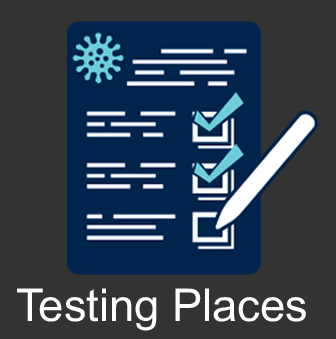
<style>
.page{position:relative;width:336px;height:339px;background:#333333}
.page>*{position:absolute;margin:0}
.t1{font:45.3px "ArialMT";color:#ffffff}
</style>
<div class="page">
<p class="t1" style="left:17px;top:288px;width:289px;height:43px">Testing Places</p>
</div>
